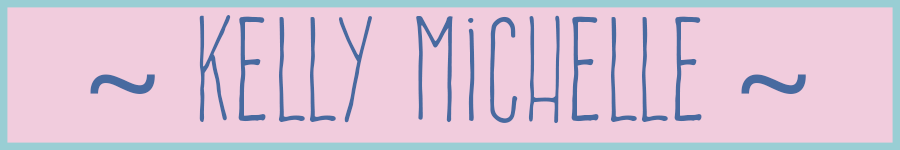
<style>
.page{position:relative;width:900px;height:150px;background:#f1ccdd}
.page>*{position:absolute;margin:0}
.t1{font:129.2px "FrenteH1-Regular";color:#486aa0}
.t2{font:129.2px "MyriadPro-Regular";color:#486aa0}
</style>
<div class="page">
<p class="t1" style="left:90px;top:15px;width:716px;height:109px"><span class="t2">~ </span>Kelly Michelle <span class="t2">~</span></p>
</div>
